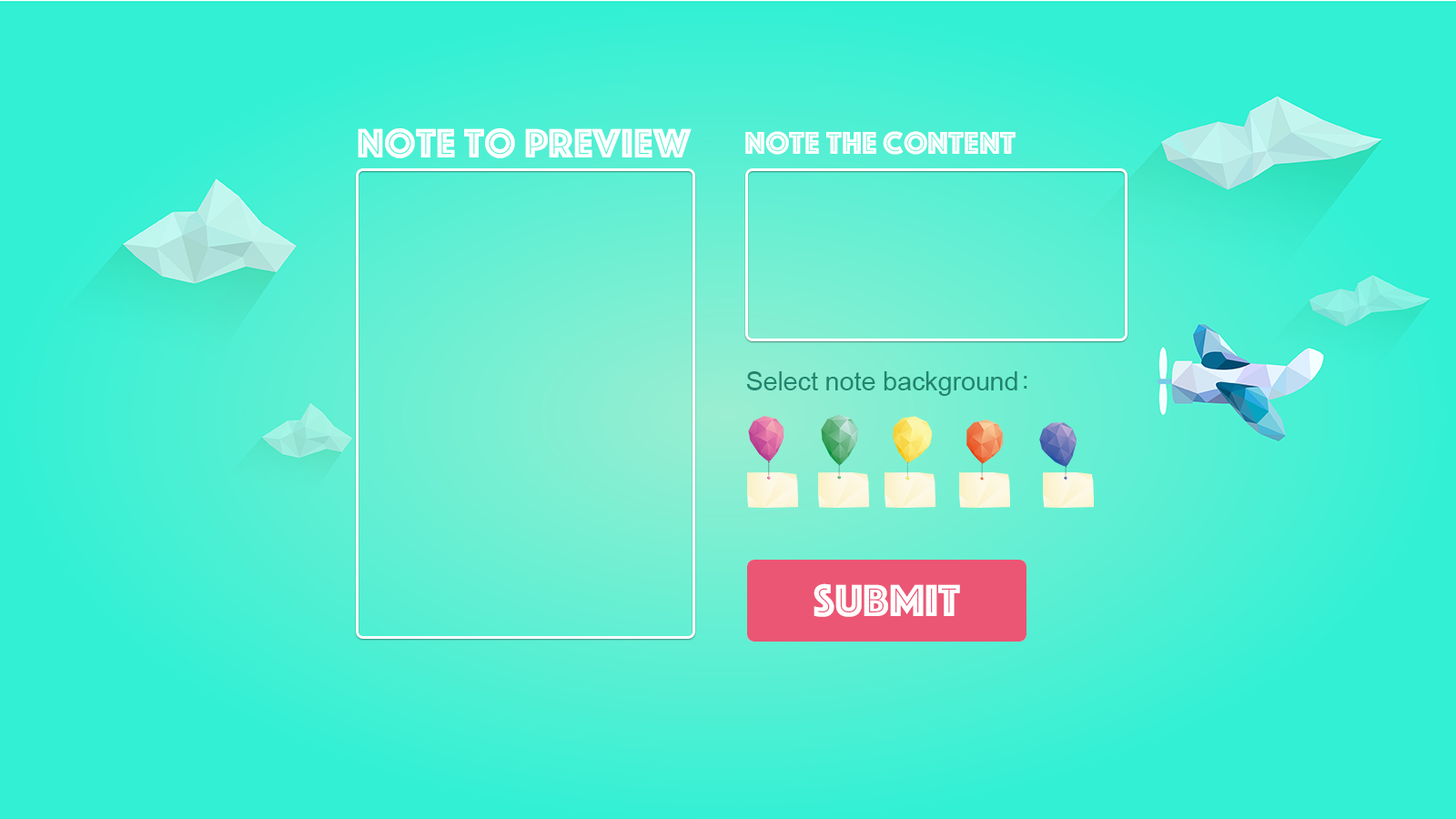
<style>
.page{position:relative;width:1456px;height:819px;background:#32f0d4}
.page>*{position:absolute;margin:0}
.t1{font:42.8px "Phosphate-Inline";color:#ffffff}
.t2{font:32.8px "Phosphate-Inline";color:#ffffff}
.t3{font:26px "ArialMT";color:#20856d}
.t4{font:26px "STHeitiSC-Light";color:#20856d}
.t5{font:47px "Phosphate-Inline";color:#ffffff}
</style>
<div class="page">
<p class="t1" style="left:358px;top:128px;width:334px;height:30px">Note to preview</p>
<p class="t2" style="left:745px;top:131px;width:271px;height:24px">Note the content</p>
<p class="t3" style="left:746px;top:371px;width:281px;height:25px">Select note background<span class="t4">：</span></p>
<p class="t5" style="left:814px;top:583px;width:146px;height:34px">SUBMIT</p>
<p class="t5" style="left:814px;top:583px;width:146px;height:34px">SUBMIT</p>
</div>
